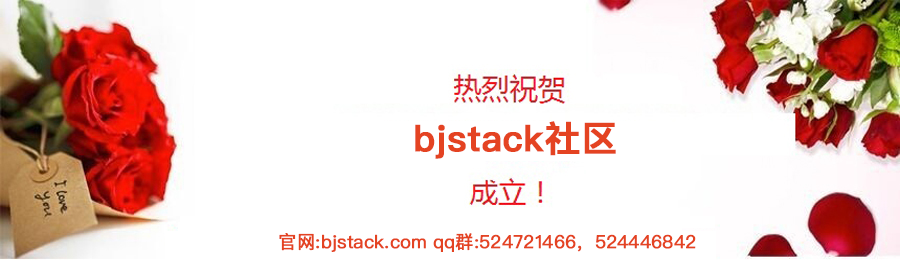
<style>
.page{position:relative;width:900px;height:260px;background:#ffffff}
.page>*{position:absolute;margin:0}
.t1{font:36px "PingFangSC-Semibold";color:#e44322;font-weight:bold}
.t2{font:18px "PingFangSC-Regular";color:#e44322;font-weight:bold}
</style>
<div class="page">
<p class="t1" style="left:415px;top:121px;width:201px;height:38px">bjstack社区</p>
<p class="t2" style="left:279px;top:233px;width:417px;height:19px">官网:bjstack.com qq群:524721466，524446842</p>
</div>
